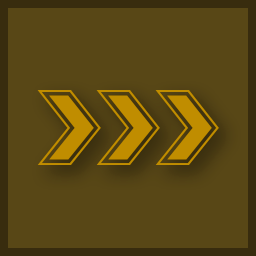
<style>
.page{position:relative;width:256px;height:256px;background:#584716}
.page>*{position:absolute;margin:0}
.t1{font:150px "SpaceRangerAcademy";color:#c08d00}
</style>
<div class="page">
<p class="t1" style="left:37px;top:90px;width:182px;height:75px">&gt;&gt;&gt;</p>
</div>
